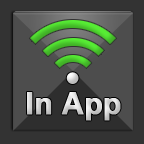
<style>
.page{position:relative;width:144px;height:144px;background:#333333}
.page>*{position:absolute;margin:0}
.t1{font:30px "Arial-BoldMT";letter-spacing:-0.01em;font-weight:bold}
</style>
<div class="page">
<p class="t1" style="left:27px;top:92px;width:94px;height:29px">In App</p>
</div>
